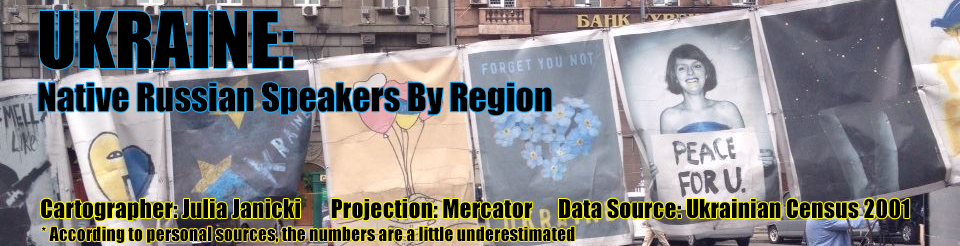
<style>
.page{position:relative;width:960px;height:246px}
.page>*{position:absolute;margin:0}
.t1{font:36px "Impact";color:#000000}
.t2{font:72px "Impact";color:#000000}
.t3{font:24px "Impact";color:#000000}
.t4{font:18px "Impact";color:#000000}
</style>
<div class="page">
<p class="t1" style="left:38px;top:11px;width:514px;height:105px"><span class="t2">UKRAINE:<br></span>Native Russian Speakers By Region</p>
<p class="t3" style="left:41px;top:198px;width:869px;height:23px">Cartographer: Julia Janicki       Projection: Mercator      Data Source: Ukrainian Census 2001</p>
<p class="t4" style="left:41px;top:226px;width:534px;height:17px">* According to personal sources, the numbers are a little underestimated</p>
</div>
